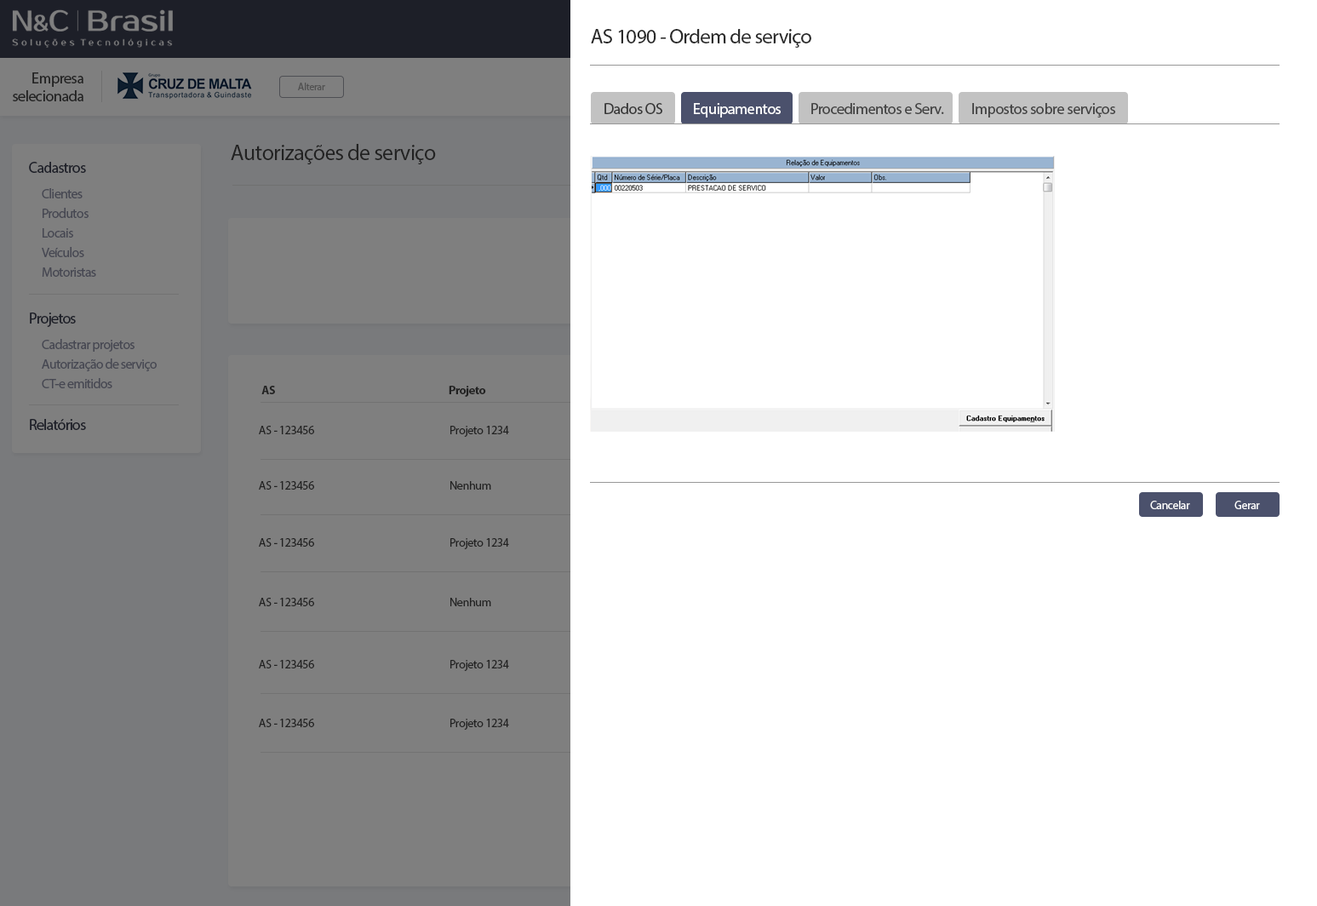
<style>
.page{position:relative;width:1317px;height:906px;background:#ffffff}
.page>*{position:absolute;margin:0}
.t1{font:20.4px "MyriadPro-Regular";letter-spacing:-0.025em;color:#2a2a2a}
.t2{font:15.3px/17.8px "MyriadPro-Regular";letter-spacing:-0.025em;color:#222222}
.t3{font:10.2px "MyriadPro-Regular";letter-spacing:-0.025em;color:#454545}
.t4{font:15.3px "MyriadPro-Regular";letter-spacing:-0.025em;color:#373737}
.t5{font:15.3px "MyriadPro-Regular";letter-spacing:-0.025em;color:#ffffff}
.t6{font:15.3px "MyriadPro-Regular";letter-spacing:-0.025em;color:#434343}
.t7{font:22.1px "MyriadPro-Regular";letter-spacing:-0.025em;color:#222222}
.t8{font:15.3px "MyriadPro-Regular";letter-spacing:-0.045em;color:#1d1f28}
.t9{font:13.6px "MyriadPro-Regular";letter-spacing:-0.045em;color:#464752}
.t10{font:13.6px "MyriadPro-Regular";letter-spacing:-0.045em;color:#464852}
.t11{font:11.9px "MyriadPro-Bold";letter-spacing:-0.025em;color:#222222}
.t12{font:11.9px "MyriadPro-Regular";letter-spacing:-0.025em;color:#222222}
.t13{font:11.7px "MyriadPro-Regular";letter-spacing:-0.025em;color:#ffffff}
</style>
<div class="page">
<p class="t1" style="left:591px;top:29px;width:220px;height:19px">AS 1090 - Ordem de serviço</p>
<p class="t2" style="left:13px;top:72px;width:70px;height:29px;text-align:right">Empresa<br>selecionada</p>
<p class="t3" style="left:298px;top:83px;width:27px;height:7px">Alterar</p>
<p class="t4" style="left:604px;top:103px;width:58px;height:11px">Dados OS</p>
<p class="t5" style="left:694px;top:103px;width:86px;height:14px">Equipamentos</p>
<p class="t6" style="left:811px;top:103px;width:133px;height:11px">Procedimentos e Serv.</p>
<p class="t6" style="left:972px;top:103px;width:143px;height:14px">Impostos sobre serviços</p>
<p class="t7" style="left:231px;top:144px;width:205px;height:20px">Autorizações de serviço</p>
<p class="t8" style="left:29px;top:162px;width:57px;height:11px">Cadastros</p>
<p class="t9" style="left:42px;top:188px;width:41px;height:10px">Clientes</p>
<p class="t9" style="left:43px;top:208px;width:46px;height:10px">Produtos</p>
<p class="t9" style="left:43px;top:228px;width:30px;height:9px">Locais</p>
<p class="t9" style="left:42px;top:247px;width:42px;height:10px">Veículos</p>
<p class="t9" style="left:42px;top:267px;width:54px;height:10px">Motoristas</p>
<p class="t8" style="left:30px;top:312px;width:46px;height:15px">Projetos</p>
<p class="t9" style="left:42px;top:339px;width:92px;height:13px">Cadastrar projetos</p>
<p class="t10" style="left:42px;top:358px;width:115px;height:13px">Autorização de serviço</p>
<p class="t9" style="left:42px;top:378px;width:70px;height:10px">CT-e emitidos</p>
<p class="t11" style="left:261px;top:386px;width:14px;height:8px">AS</p>
<p class="t11" style="left:449px;top:386px;width:37px;height:11px">Projeto</p>
<p class="t8" style="left:30px;top:419px;width:56px;height:11px">Relatórios</p>
<p class="t12" style="left:259px;top:426px;width:55px;height:8px">AS - 123456</p>
<p class="t12" style="left:450px;top:426px;width:59px;height:11px">Projeto 1234</p>
<p class="t12" style="left:259px;top:481px;width:55px;height:8px">AS - 123456</p>
<p class="t12" style="left:450px;top:481px;width:41px;height:8px">Nenhum</p>
<p class="t13" style="left:1150px;top:500px;width:40px;height:9px">Cancelar</p>
<p class="t13" style="left:1234px;top:500px;width:26px;height:9px">Gerar</p>
<p class="t12" style="left:259px;top:538px;width:55px;height:8px">AS - 123456</p>
<p class="t12" style="left:450px;top:538px;width:59px;height:11px">Projeto 1234</p>
<p class="t12" style="left:259px;top:598px;width:55px;height:8px">AS - 123456</p>
<p class="t12" style="left:450px;top:598px;width:41px;height:8px">Nenhum</p>
<p class="t12" style="left:259px;top:660px;width:55px;height:8px">AS - 123456</p>
<p class="t12" style="left:450px;top:660px;width:59px;height:11px">Projeto 1234</p>
<p class="t12" style="left:259px;top:718px;width:55px;height:9px">AS - 123456</p>
<p class="t12" style="left:450px;top:718px;width:59px;height:11px">Projeto 1234</p>
</div>
